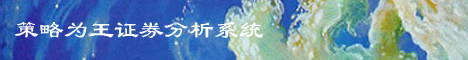
<style>
.page{position:relative;width:468px;height:60px}
.page>*{position:absolute;margin:0}
.t1{font:25px "Á¥Êé-Regular";color:#ffffff}
</style>
<div class="page">
<p class="t1" style="left:14px;top:22px;width:250px;height:16px">策略为王证券分析系统</p>
</div>
